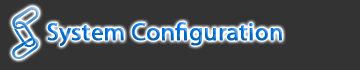
<style>
.page{position:relative;width:360px;height:70px;background:#333333}
.page>*{position:absolute;margin:0}
.t1{font:25px "MyriadPro-Regular";font-weight:bold}
</style>
<div class="page">
<p class="t1" style="left:47px;top:22px;width:235px;height:24px">System Configuration</p>
</div>
